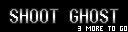
<style>
.page{position:relative;width:128px;height:32px;background:#000000}
.page>*{position:absolute;margin:0}
.t1{font:18px "Terminal"}
</style>
<div class="page">
<p class="t1" style="left:10px;top:9px;width:108px;height:14px">SHOOT GHOST</p>
</div>
